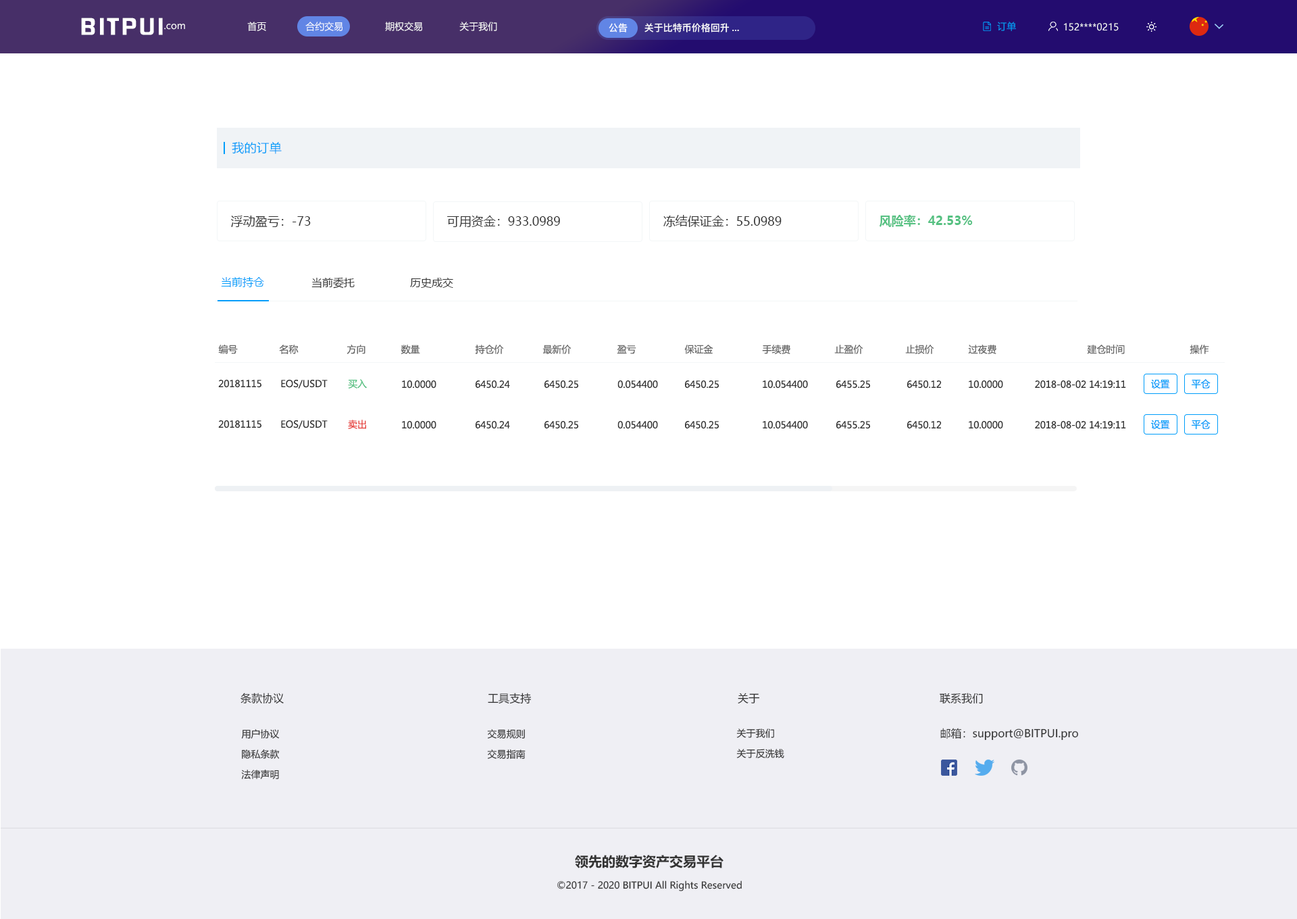
<style>
.page{position:relative;width:1297px;height:919px;background:#ffffff}
.page>*{position:absolute;margin:0}
.t1{font:20.7px "FZHZGBJW--GB1-0";letter-spacing:0.1em;color:#ffffff;scale:1.14 1}
.t2{font:9.5px "MicrosoftYaHei";color:#ffffff}
.t3{font:9.5px "PingFang-SC-Bold";color:#ffffff}
.t4{font:9.5px "MicrosoftYaHei";color:#009dfa}
.t5{font:12.2px "MicrosoftYaHei";letter-spacing:0.03em;color:#009dfa}
.t6{font:12.2px "MicrosoftYaHei";color:#333333}
.t7{font:12.2px "MicrosoftYaHei-Bold";color:#56c182}
.t8{font:10.8px "MicrosoftYaHei";color:#009dfa}
.t9{font:10.8px "MicrosoftYaHei";color:#333333}
.t10{font:9.5px "MicrosoftYaHei";letter-spacing:-0.01em;color:#666666}
.t11{font:9.5px "MicrosoftYaHei";letter-spacing:-0.01em;color:#333333}
.t12{font:9.5px "MicrosoftYaHei";letter-spacing:-0.01em;color:#56c182}
.t13{font:9.5px "MicrosoftYaHei";letter-spacing:-0.01em;color:#009dfa}
.t14{font:9.5px "MicrosoftYaHei";letter-spacing:-0.01em;color:#e74642}
.t15{font:9.5px/20.3px "MicrosoftYaHei";color:#333333}
.t16{font:13.5px "MicrosoftYaHei-Bold";color:#333333}
.t17{font:9.5px "MicrosoftYaHei";color:#333333}
</style>
<div class="page">
<p class="t1" style="left:81px;top:18px;width:82px;height:17px">BITPUI</p>
<p class="t2" style="left:164px;top:24px;width:21px;height:6px">.com</p>
<p class="t2" style="left:247px;top:22px;width:250px;height:9px">首页              合约交易               期权交易             关于我们</p>
<p class="t3" style="left:609px;top:23px;width:19px;height:9px">公告</p>
<p class="t3" style="left:645px;top:23px;width:94px;height:9px">关于比特币价格回升...</p>
<p class="t4" style="left:997px;top:22px;width:19px;height:9px">订单</p>
<p class="t2" style="left:1064px;top:23px;width:55px;height:8px">152****0215</p>
<p class="t5" style="left:232px;top:142px;width:50px;height:12px">我的订单</p>
<p class="t6" style="left:231px;top:216px;width:80px;height:11px">浮动盈亏：-73</p>
<p class="t6" style="left:447px;top:216px;width:113px;height:11px">可用资金：933.0989</p>
<p class="t6" style="left:664px;top:215px;width:118px;height:12px">冻结保证金：55.0989</p>
<p class="t7" style="left:879px;top:215px;width:94px;height:12px">风险率：42.53%</p>
<p class="t8" style="left:221px;top:277px;width:43px;height:10px">当前持仓</p>
<p class="t9" style="left:312px;top:277px;width:43px;height:12px">当前委托</p>
<p class="t9" style="left:410px;top:278px;width:43px;height:10px">历史成交</p>
<p class="t10" style="left:218px;top:345px;width:20px;height:9px">编号</p>
<p class="t10" style="left:279px;top:345px;width:20px;height:9px">名称</p>
<p class="t10" style="left:347px;top:345px;width:19px;height:9px">方向</p>
<p class="t10" style="left:401px;top:345px;width:19px;height:9px">数量</p>
<p class="t10" style="left:475px;top:345px;width:29px;height:9px">持仓价</p>
<p class="t10" style="left:543px;top:345px;width:29px;height:9px">最新价</p>
<p class="t10" style="left:617px;top:345px;width:20px;height:9px">盈亏</p>
<p class="t10" style="left:685px;top:345px;width:29px;height:9px">保证金</p>
<p class="t10" style="left:762px;top:345px;width:29px;height:9px">手续费</p>
<p class="t10" style="left:835px;top:345px;width:29px;height:9px">止盈价</p>
<p class="t10" style="left:906px;top:345px;width:29px;height:9px">止损价</p>
<p class="t10" style="left:968px;top:345px;width:29px;height:9px">过夜费</p>
<p class="t10" style="left:1087px;top:345px;width:38px;height:9px">建仓时间</p>
<p class="t10" style="left:1190px;top:345px;width:20px;height:9px">操作</p>
<p class="t11" style="left:218px;top:380px;width:44px;height:8px">20181115</p>
<p class="t11" style="left:281px;top:380px;width:47px;height:9px">EOS/USDT</p>
<p class="t12" style="left:348px;top:379px;width:19px;height:10px">买入</p>
<p class="t11" style="left:402px;top:380px;width:35px;height:9px">10.0000</p>
<p class="t11" style="left:476px;top:380px;width:34px;height:9px">6450.24</p>
<p class="t11" style="left:545px;top:380px;width:34px;height:9px">6450.25</p>
<p class="t11" style="left:618px;top:380px;width:40px;height:9px">0.054400</p>
<p class="t11" style="left:685px;top:380px;width:35px;height:9px">6450.25</p>
<p class="t11" style="left:763px;top:380px;width:45px;height:9px">10.054400</p>
<p class="t11" style="left:837px;top:380px;width:34px;height:9px">6455.25</p>
<p class="t11" style="left:908px;top:380px;width:34px;height:9px">6450.12</p>
<p class="t11" style="left:969px;top:380px;width:35px;height:9px">10.0000</p>
<p class="t11" style="left:1035px;top:380px;width:92px;height:9px">2018-08-02 14:19:11</p>
<p class="t13" style="left:1152px;top:379px;width:18px;height:10px">设置</p>
<p class="t13" style="left:1192px;top:379px;width:19px;height:10px">平仓</p>
<p class="t11" style="left:218px;top:420px;width:44px;height:8px">20181115</p>
<p class="t11" style="left:281px;top:420px;width:47px;height:9px">EOS/USDT</p>
<p class="t14" style="left:348px;top:420px;width:18px;height:9px">卖出</p>
<p class="t11" style="left:402px;top:421px;width:35px;height:8px">10.0000</p>
<p class="t11" style="left:476px;top:421px;width:34px;height:8px">6450.24</p>
<p class="t11" style="left:545px;top:421px;width:34px;height:8px">6450.25</p>
<p class="t11" style="left:618px;top:421px;width:40px;height:8px">0.054400</p>
<p class="t11" style="left:685px;top:421px;width:35px;height:8px">6450.25</p>
<p class="t11" style="left:763px;top:421px;width:45px;height:8px">10.054400</p>
<p class="t11" style="left:837px;top:421px;width:34px;height:8px">6455.25</p>
<p class="t11" style="left:908px;top:421px;width:34px;height:8px">6450.12</p>
<p class="t11" style="left:969px;top:421px;width:35px;height:8px">10.0000</p>
<p class="t11" style="left:1035px;top:421px;width:92px;height:8px">2018-08-02 14:19:11</p>
<p class="t13" style="left:1152px;top:420px;width:18px;height:9px">设置</p>
<p class="t13" style="left:1192px;top:420px;width:19px;height:9px">平仓</p>
<p class="t9" style="left:241px;top:693px;width:43px;height:10px">条款协议</p>
<p class="t9" style="left:488px;top:693px;width:43px;height:11px">工具支持</p>
<p class="t9" style="left:738px;top:693px;width:22px;height:10px">关于</p>
<p class="t9" style="left:940px;top:693px;width:43px;height:11px">联系我们</p>
<p class="t15" style="left:241px;top:729px;width:39px;height:50px;text-align:center">用户协议<br>隐私条款<br>法律声明</p>
<p class="t15" style="left:487px;top:729px;width:39px;height:30px">交易规则<br>交易指南</p>
<p class="t15" style="left:737px;top:728px;width:48px;height:30px">关于我们<br>关于反洗钱</p>
<p class="t9" style="left:941px;top:728px;width:138px;height:13px">邮箱：support@BITPUI.pro</p>
<p class="t16" style="left:575px;top:855px;width:149px;height:13px">领先的数字资产交易平台</p>
<p class="t17" style="left:558px;top:881px;width:184px;height:10px">©2017 - 2020 BITPUI All Rights Reserved</p>
</div>
